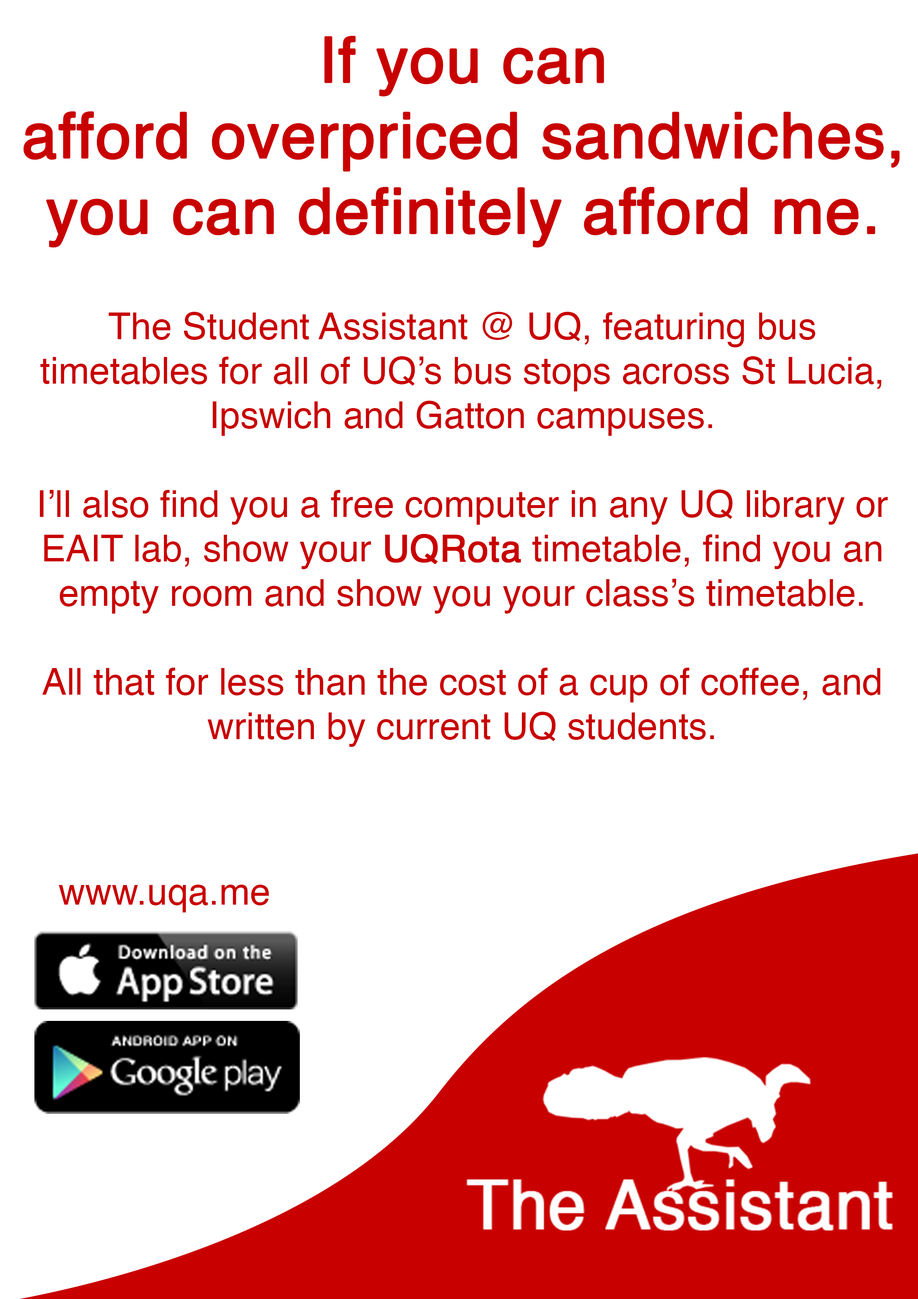
<style>
.page{position:relative;width:918px;height:1299px;background:#ffffff}
.page>*{position:absolute;margin:0}
.t1{font:62.9px "Helvetica";color:#c90000;font-weight:bold}
.t2{font:37px "Helvetica";color:#c90000}
.t3{font:37px "Helvetica";color:#c90000;font-weight:bold}
</style>
<div class="page">
<p class="t1" style="left:23px;top:36px;width:877px;height:212px;text-align:center">If you can<br>afford overpriced sandwiches,<br>you can definitely afford me.</p>
<p class="t2" style="left:40px;top:312px;width:848px;height:435px;text-align:center">The Student Assistant @ UQ, featuring bus timetables for all of UQ’s bus stops across St Lucia, Ipswich and Gatton campuses.<br><br>I’ll also find you a free computer in any UQ library or EAIT lab, show your <span class="t3">UQRota</span> timetable, find you an empty room and show you your class’s timetable.<br><br>All that for less than the cost of a cup of coffee, and written by current UQ students.</p>
<p class="t2" style="left:59px;top:884px;width:210px;height:28px">www.uqa.me</p>
</div>
